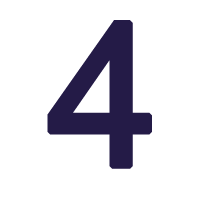
<style>
.page{position:relative;width:200px;height:200px;background:#ffffff}
.page>*{position:absolute;margin:0}
.t1{font:200px "ArialMT";color:#241b47;font-weight:bold}
</style>
<div class="page">
<p class="t1" style="left:47px;top:20px;width:105px;height:149px">4</p>
</div>
